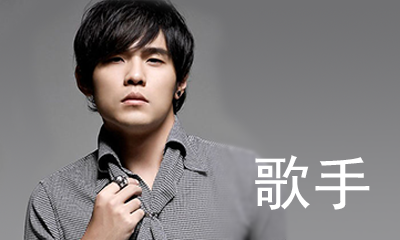
<style>
.page{position:relative;width:400px;height:240px}
.page>*{position:absolute;margin:0}
.t1{font:60px "SimHei";color:#ffffff}
</style>
<div class="page">
<p class="t1" style="left:255px;top:155px;width:115px;height:55px">歌手</p>
</div>
